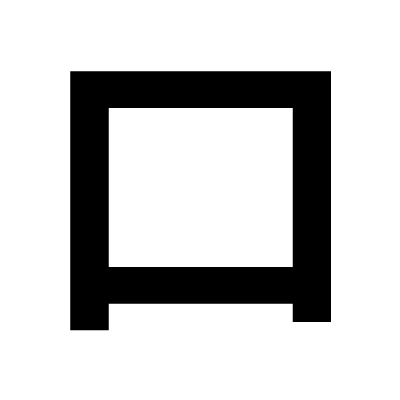
<style>
.page{position:relative;width:400px;height:400px;background:#ffffff}
.page>*{position:absolute;margin:0}
.t1{font:424.8px "MS-PGothic";color:#000000}
</style>
<div class="page">
<p class="t1" style="left:70px;top:71px;width:261px;height:260px">ロ</p>
</div>
